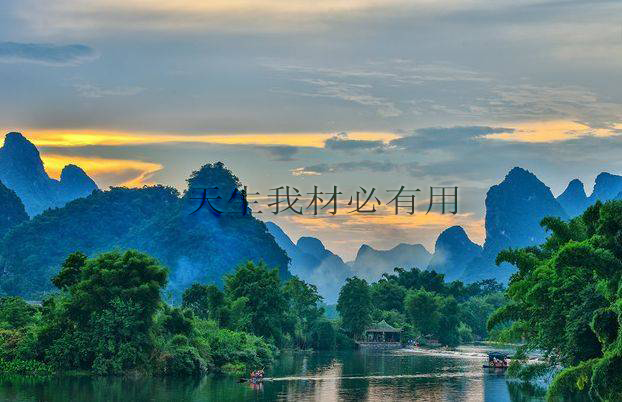
<style>
.page{position:relative;width:622px;height:402px}
.page>*{position:absolute;margin:0}
.t1{font:32.4px "SimSun";scale:1.22 1}
</style>
<div class="page">
<p class="t1" style="left:188px;top:185px;width:271px;height:31px">天生我材必有用</p>
</div>
